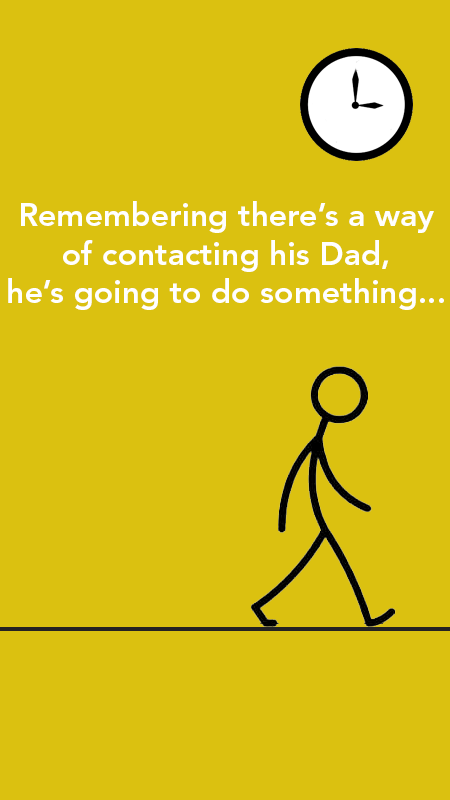
<style>
.page{position:relative;width:450px;height:800px;background:#dbc110}
.page>*{position:absolute;margin:0}
.t1{font:32px "AvenirLTStd-Heavy";color:#ffffff}
</style>
<div class="page">
<p class="t1" style="left:8px;top:201px;width:436px;height:109px;text-align:center">Remembering there’s a way<br>of contacting his Dad,<br>he’s going to do something...</p>
</div>
